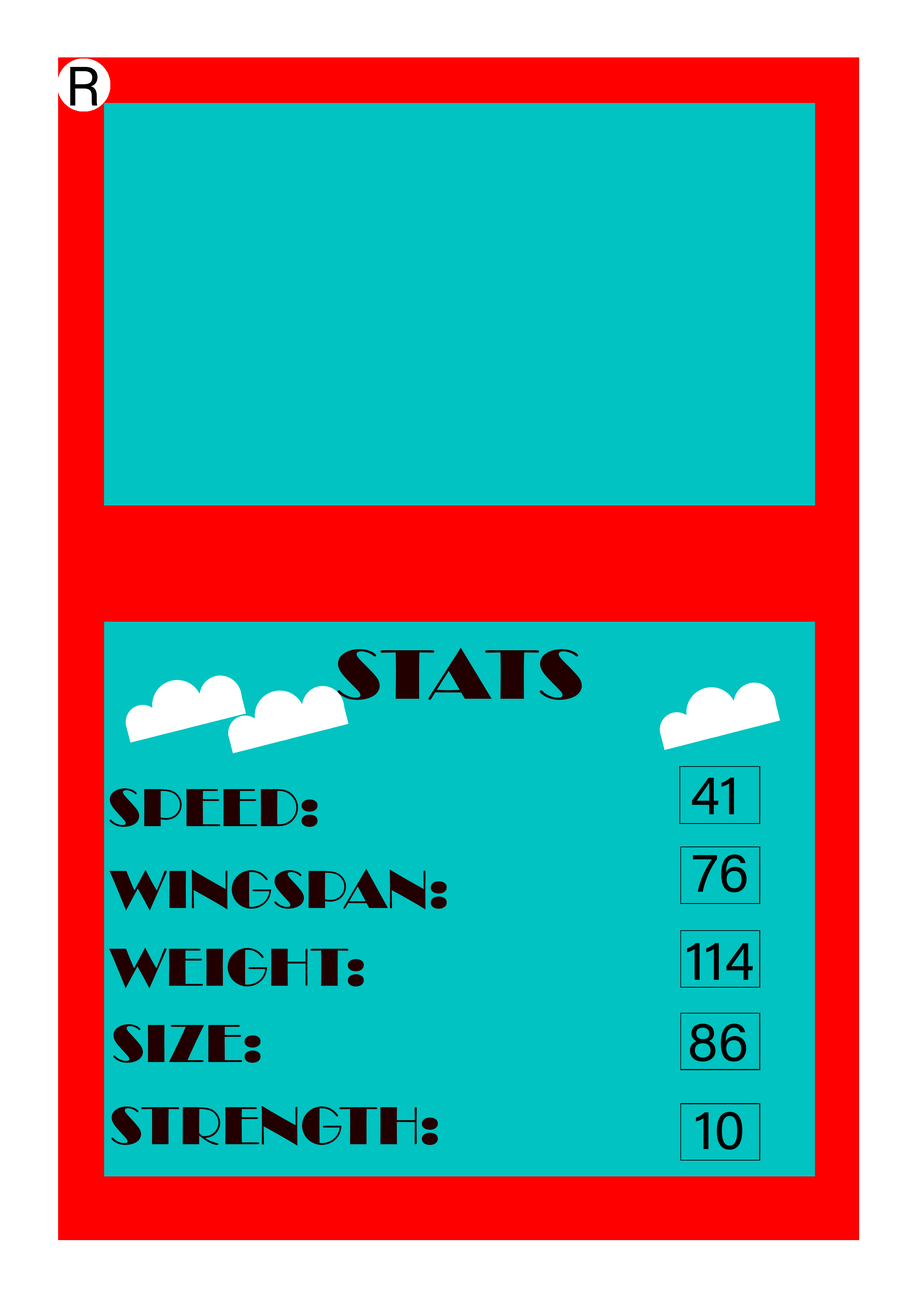
<style>
.page{position:relative;width:918px;height:1299px;background:#01c3c1}
.page>*{position:absolute;margin:0}
.t1{font:55.5px "AcuminConcept-Regular";color:#000000}
.t2{font:72.4px "Broadway";color:#230000;scale:1.09 1}
.t3{font:55.5px "Broadway";color:#230000}
</style>
<div class="page">
<p class="t1" style="left:70px;top:67px;width:28px;height:39px">R</p>
<p class="t2" style="left:338px;top:648px;width:244px;height:52px">STATS</p>
<p class="t1" style="left:692px;top:777px;width:42px;height:37px">41</p>
<p class="t3" style="left:110px;top:788px;width:208px;height:39px">SPEED:</p>
<p class="t1" style="left:693px;top:854px;width:54px;height:38px">76</p>
<p class="t3" style="left:109px;top:869px;width:338px;height:41px">WINGSPAN:</p>
<p class="t3" style="left:109px;top:947px;width:255px;height:41px">WEIGHT:</p>
<p class="t1" style="left:687px;top:943px;width:66px;height:37px">114</p>
<p class="t3" style="left:113px;top:1024px;width:148px;height:39px">SIZE:</p>
<p class="t1" style="left:690px;top:1023px;width:56px;height:38px">86</p>
<p class="t3" style="left:111px;top:1105px;width:327px;height:40px">STRENGTH:</p>
<p class="t1" style="left:696px;top:1111px;width:47px;height:39px">10</p>
</div>
